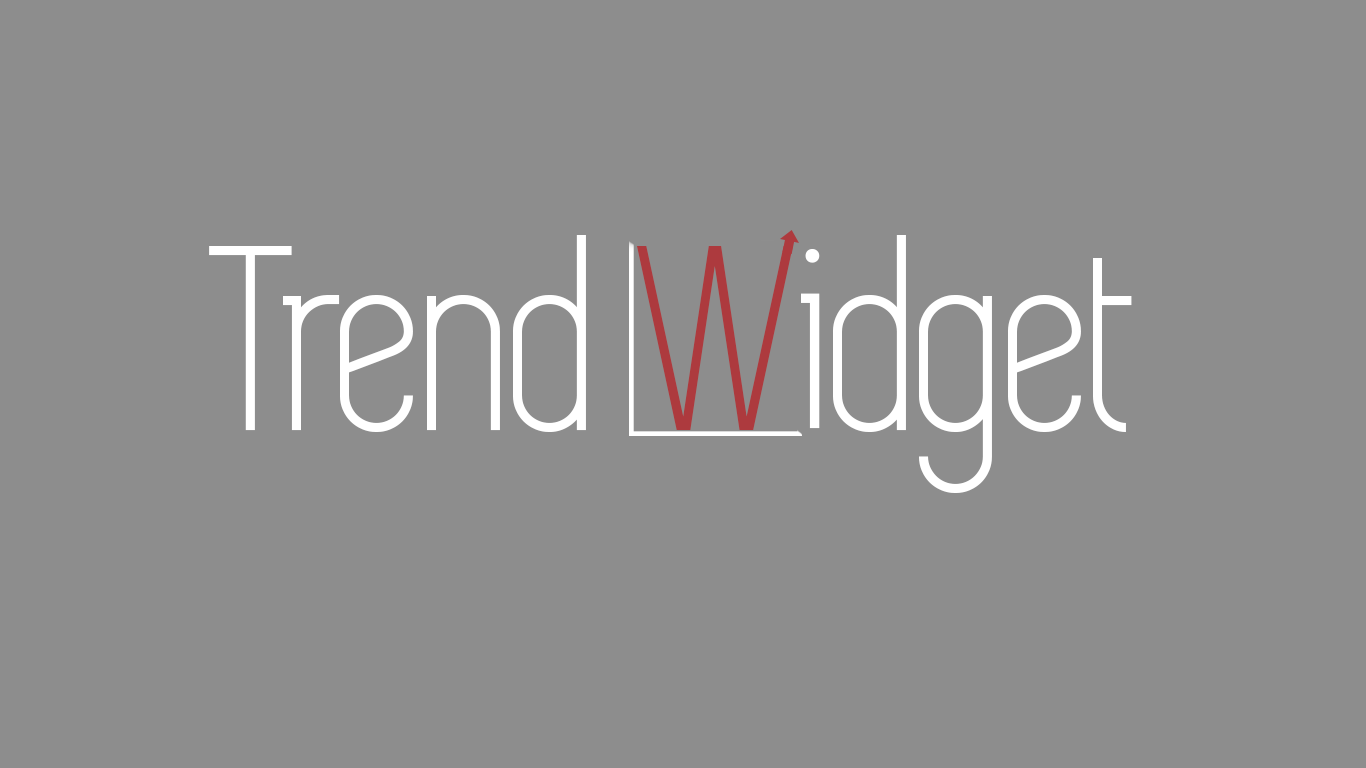
<style>
.page{position:relative;width:1366px;height:768px;background:#8d8d8d}
.page>*{position:absolute;margin:0}
.t1{font:272px "Simplifica";letter-spacing:-0.02em;color:#ffffff}
.t2{font:272px "Simplifica";letter-spacing:-0.02em;color:#ad3a3e}
</style>
<div class="page">
<p class="t1" style="left:209px;top:235px;width:923px;height:258px">Trend <span class="t2">W</span>idget</p>
</div>
